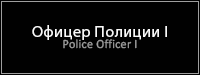
<style>
.page{position:relative;width:200px;height:75px;background:#010101}
.page>*{position:absolute;margin:0}
.t1{font:15.8px "MyriadPro-Regular";letter-spacing:0.02em;color:#f9f9f9;scale:1.03 1}
.t2{font:12.6px "Calibri";letter-spacing:0.02em;color:#9e9e9e;scale:0.96 1}
</style>
<div class="page">
<p class="t1" style="left:32px;top:25px;width:135px;height:15px">Офицер Полиции I</p>
<p class="t2" style="left:63px;top:39px;width:74px;height:10px">Police Officer I</p>
</div>
